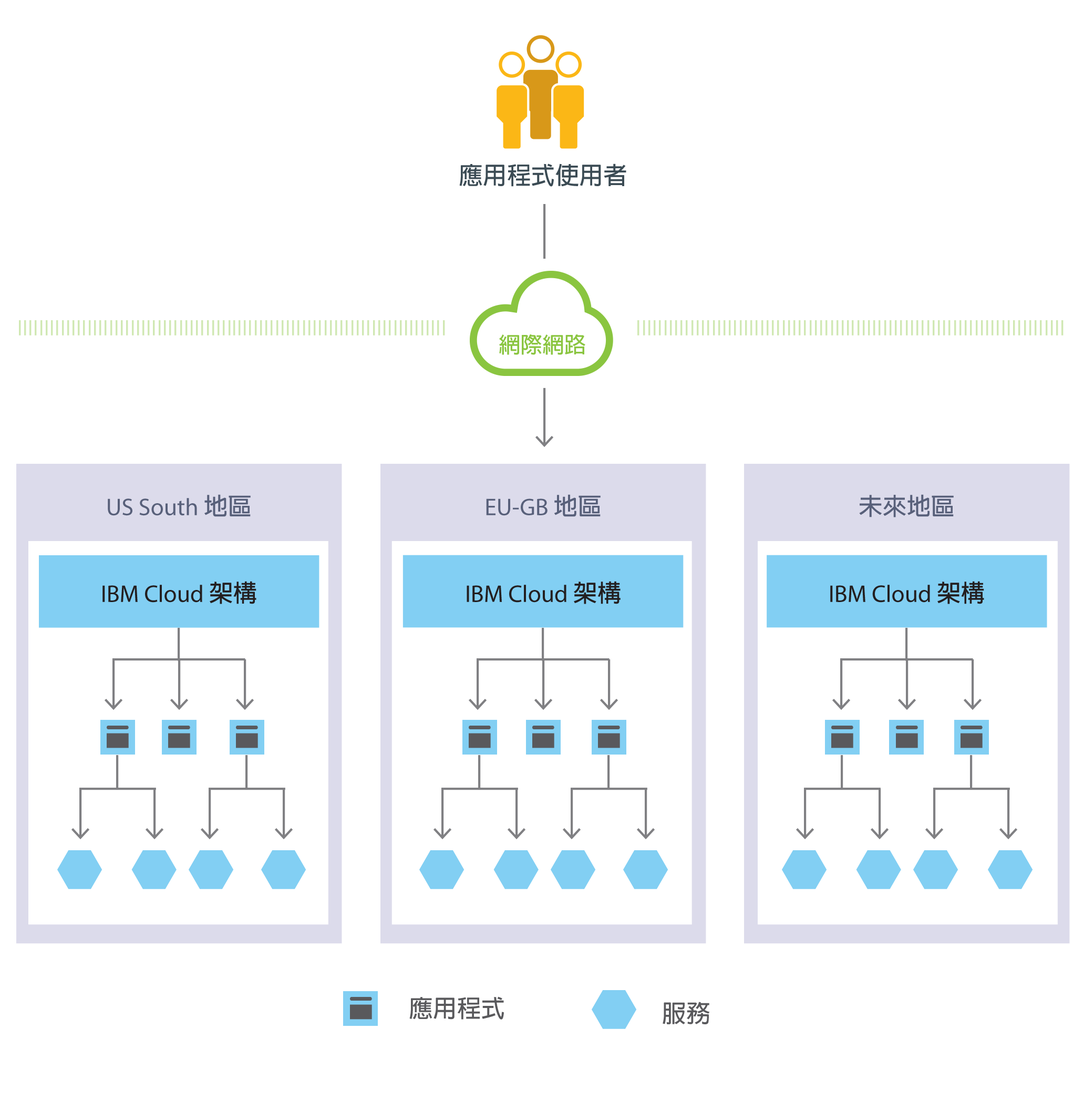
<style>
.page{position:relative;width:1084px;height:1100px;background:#ffffff}
.page>*{position:absolute;margin:0}
.t1{font:24.1px "AdobeFanHeitiStd-Bold";color:#3b4b54}
.t2{font:21.9px "AdobeFanHeitiStd-Bold";color:#8ac540}
.t3{font:24.1px "MyriadPro-Regular";color:#58607a}
.t4{font:24.1px "AdobeFanHeitiStd-Bold";color:#58607a}
.t5{font:24.1px "MyriadPro-Regular";color:#231f20}
.t6{font:24.1px "AdobeFanHeitiStd-Bold";color:#231f20}
.t7{font:24.1px "AdobeFanHeitiStd-Bold";color:#59595c}
</style>
<div class="page">
<p class="t1" style="left:459px;top:163px;width:168px;height:24px">應用程式使用者</p>
<p class="t2" style="left:499px;top:334px;width:87px;height:21px">網際網路</p>
<p class="t3" style="left:108px;top:494px;width:143px;height:23px">US South <span class="t4">地區</span></p>
<p class="t3" style="left:486px;top:494px;width:115px;height:23px">EU-GB <span class="t4">地區</span></p>
<p class="t4" style="left:859px;top:494px;width:95px;height:23px">未來地區</p>
<p class="t5" style="left:102px;top:581px;width:155px;height:23px">IBM Cloud <span class="t6">架構</span></p>
<p class="t5" style="left:467px;top:581px;width:154px;height:23px">IBM Cloud <span class="t6">架構</span></p>
<p class="t5" style="left:831px;top:581px;width:154px;height:23px">IBM Cloud <span class="t6">架構</span></p>
<p class="t7" style="left:409px;top:996px;width:95px;height:23px">應用程式</p>
<p class="t7" style="left:663px;top:1001px;width:47px;height:23px">服務</p>
</div>
